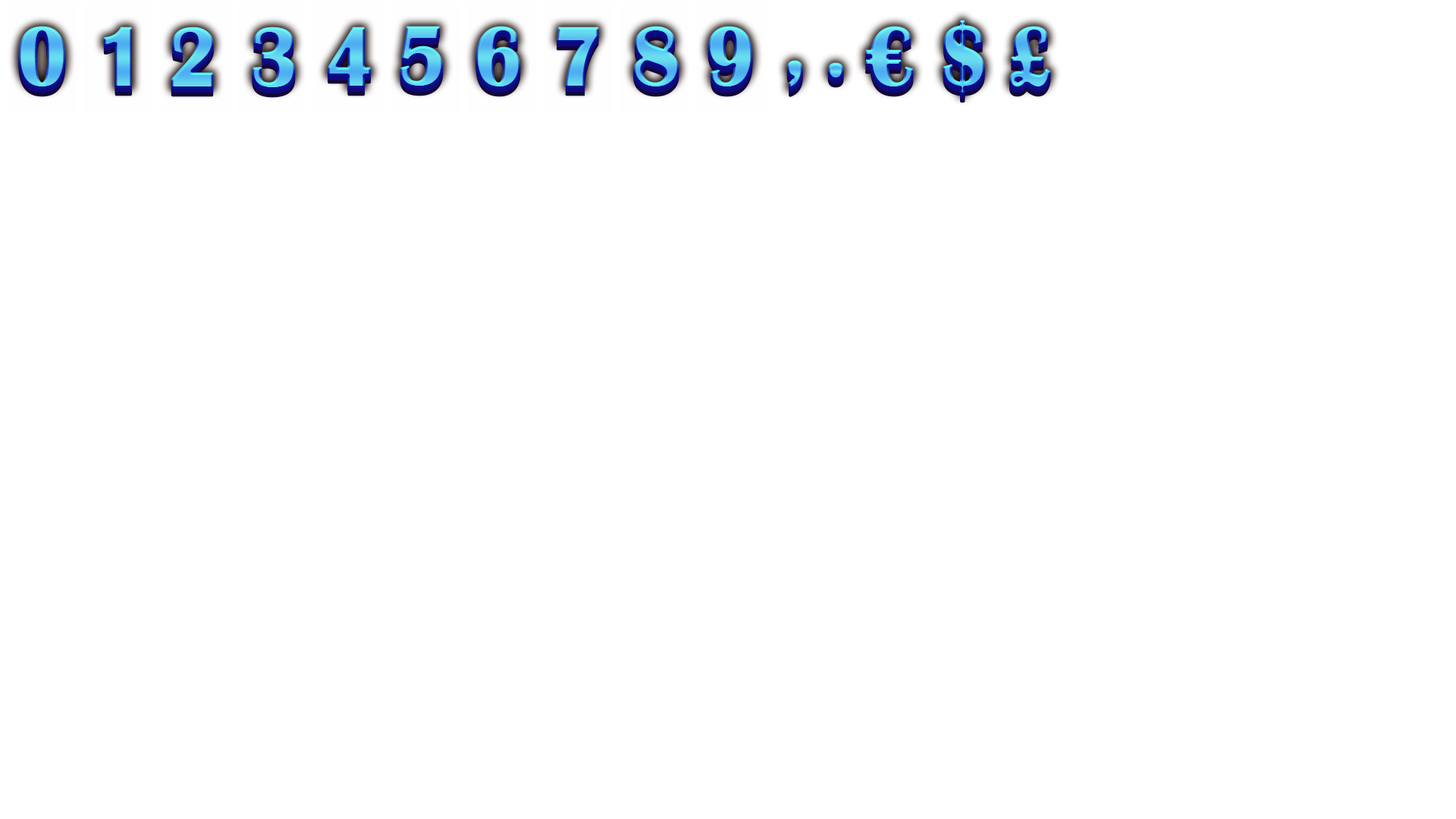
<style>
.page{position:relative;width:1456px;height:819px;background:#ffffff}
.page>*{position:absolute;margin:0}
.t1{font:88.5px "BritannicBold";letter-spacing:0.02em;text-transform:uppercase;font-weight:bold;scale:0.91 1}
</style>
<div class="page">
<p class="t1" style="left:18px;top:26px;width:48px;height:63px">0</p>
<p class="t1" style="left:103px;top:27px;width:29px;height:62px">1</p>
<p class="t1" style="left:171px;top:27px;width:43px;height:62px">2</p>
<p class="t1" style="left:252px;top:27px;width:44px;height:63px">3</p>
<p class="t1" style="left:328px;top:27px;width:43px;height:62px">4</p>
<p class="t1" style="left:400px;top:26px;width:44px;height:63px">5</p>
<p class="t1" style="left:475px;top:26px;width:46px;height:63px">6</p>
<p class="t1" style="left:556px;top:27px;width:43px;height:62px">7</p>
<p class="t1" style="left:633px;top:26px;width:46px;height:63px">8</p>
<p class="t1" style="left:708px;top:26px;width:45px;height:63px">9</p>
<p class="t1" style="left:864px;top:26px;width:50px;height:63px">€</p>
<p class="t1" style="left:943px;top:20px;width:42px;height:76px">$</p>
<p class="t1" style="left:1009px;top:26px;width:42px;height:63px">£</p>
<p class="t1" style="left:786px;top:60px;width:17px;height:29px">,</p>
<p class="t1" style="left:827px;top:62px;width:17px;height:18px">.</p>
</div>
